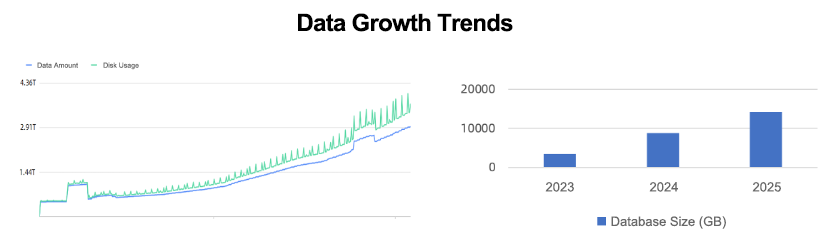
<style>
.page{position:relative;width:832px;height:244px;background:#ffffff}
.page>*{position:absolute;margin:0}
.t1{font:24px "Arial-BoldMT";letter-spacing:-0.03em;color:#000000}
.t2{font:7px "ArialMT";color:#676767}
.t3{font:13px "ArialMT";color:#676767}
</style>
<div class="page">
<p class="t1" style="left:298px;top:13px;width:215px;height:19px">Data Growth Trends</p>
<p class="t2" style="left:37px;top:62px;width:41px;height:6px">Data Amount</p>
<p class="t2" style="left:103px;top:62px;width:36px;height:8px">Disk Usage</p>
<p class="t3" style="left:545px;top:182px;width:29px;height:10px">2023</p>
<p class="t3" style="left:649px;top:182px;width:29px;height:10px">2024</p>
<p class="t3" style="left:752px;top:182px;width:29px;height:10px">2025</p>
<p class="t3" style="left:611px;top:216px;width:115px;height:13px">Database Size (GB)</p>
</div>
